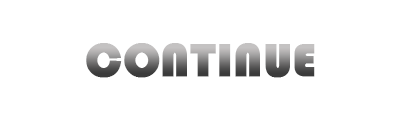
<style>
.page{position:relative;width:400px;height:120px;background:#ffffff}
.page>*{position:absolute;margin:0}
.t1{font:48px "Bauhaus93";font-weight:bold}
</style>
<div class="page">
<p class="t1" style="left:86px;top:43px;width:229px;height:35px">CONTINUE</p>
</div>
